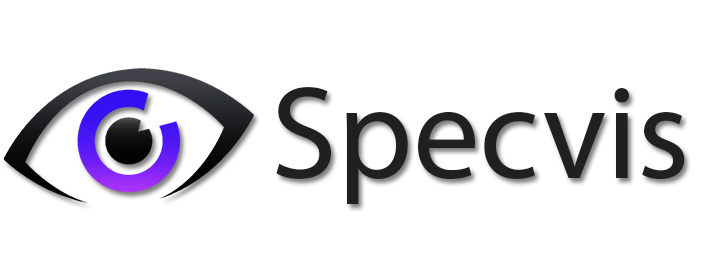
<style>
.page{position:relative;width:720px;height:270px;background:#ffffff}
.page>*{position:absolute;margin:0}
.t1{font:133.3px "MyriadPro-Regular";color:#202020}
</style>
<div class="page">
<p class="t1" style="left:276px;top:87px;width:409px;height:117px">Specvis</p>
</div>
